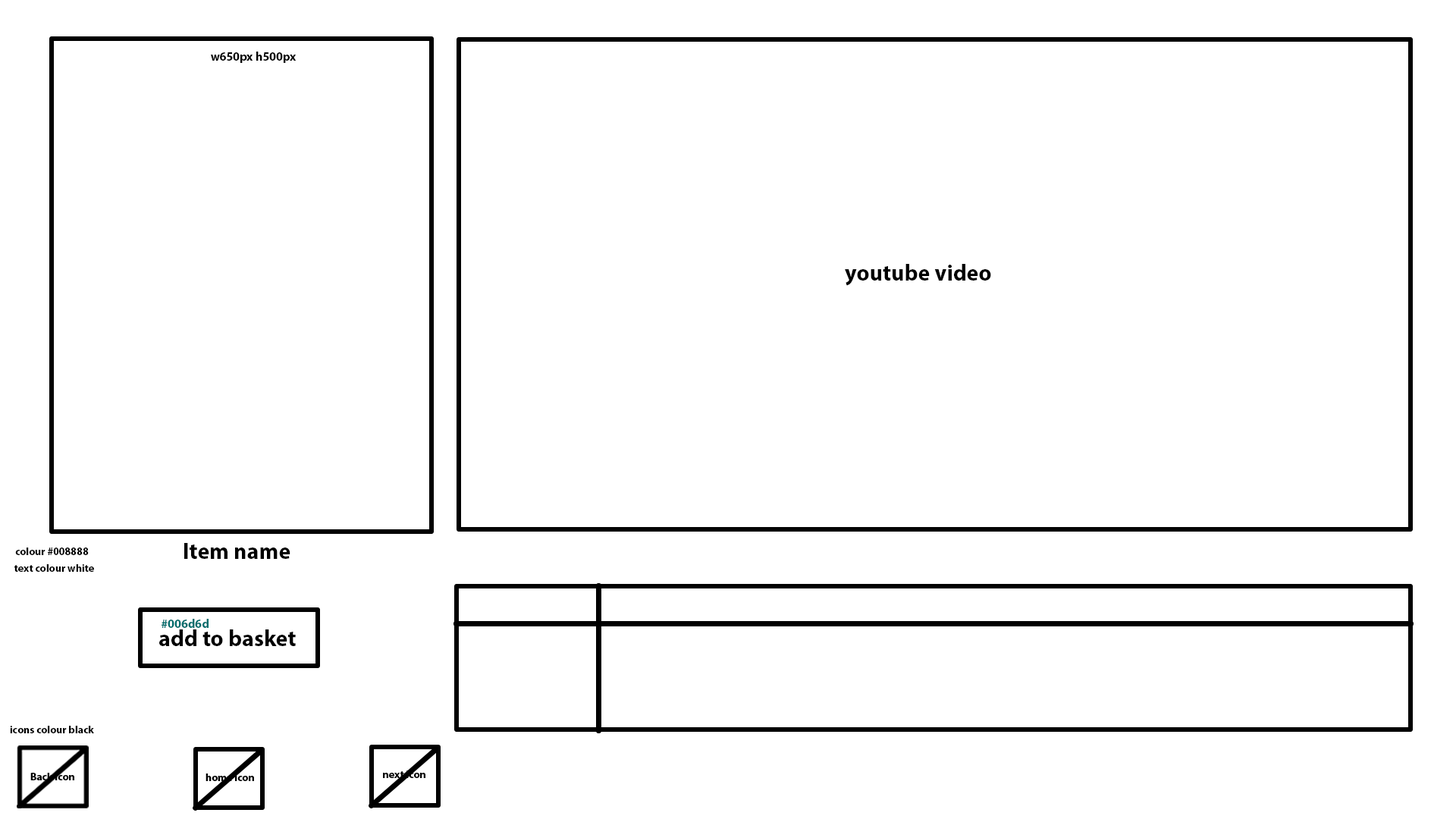
<style>
.page{position:relative;width:1456px;height:819px;background:#ffffff}
.page>*{position:absolute;margin:0}
.t1{font:12.1px "MyriadPro-Bold";color:#000000}
.t2{font:22.7px "MyriadPro-Bold";color:#000000}
.t3{font:10.6px "MyriadPro-Bold";color:#000000}
.t4{font:12.1px "MyriadPro-Bold";color:#006d6d}
</style>
<div class="page">
<p class="t1" style="left:211px;top:52px;width:86px;height:11px">w650px h500px</p>
<p class="t2" style="left:845px;top:264px;width:146px;height:22px">youtube video</p>
<p class="t2" style="left:184px;top:543px;width:106px;height:16px">Item name</p>
<p class="t3" style="left:15px;top:548px;width:74px;height:7px">colour #008888</p>
<p class="t3" style="left:14px;top:564px;width:80px;height:8px">text colour white</p>
<p class="t2" style="left:159px;top:629px;width:137px;height:17px">add to basket</p>
<p class="t4" style="left:162px;top:619px;width:47px;height:9px">#006d6d</p>
<p class="t3" style="left:10px;top:726px;width:84px;height:7px">icons colour black</p>
</div>
